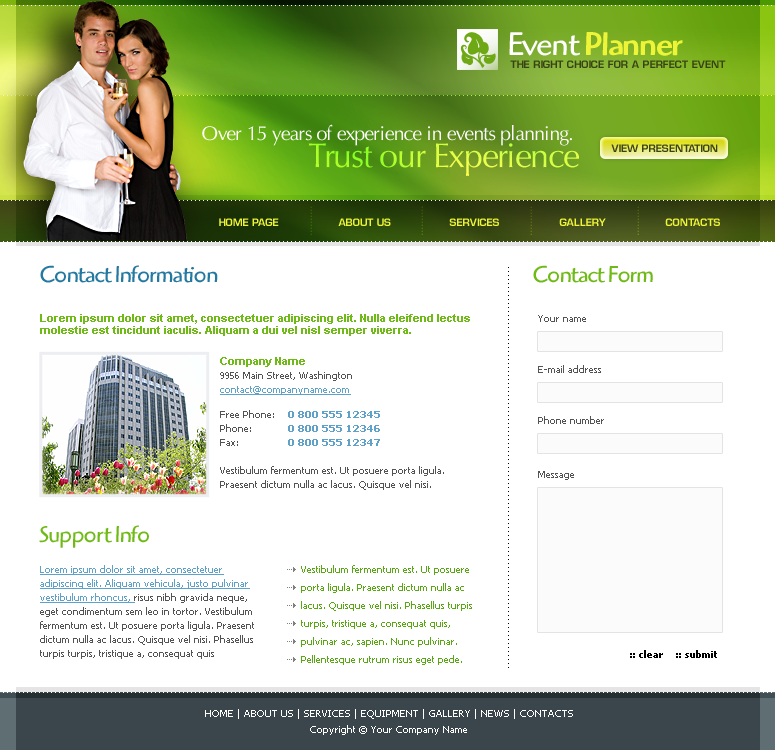
<style>
.page{position:relative;width:775px;height:750px;background:#ffffff}
.page>*{position:absolute;margin:0}
.t1{font:34px "HighlanderStd-Medium";letter-spacing:-0.04em;color:#eef538}
.t2{font:34px "HighlanderStd-Book";letter-spacing:-0.04em;color:#ffffff}
.t3{font:10px "EurostileLTStd-Demi";color:#384314;text-transform:uppercase}
.t4{font:20px "OptimaLTStd";letter-spacing:-0.04em;color:#ffffff}
.t5{font:34px "OptimaLTStd";letter-spacing:-0.04em}
.t6{font:8.3px "EurostileLTStd-Demi";text-transform:uppercase}
.t7{font:10px "EurostileLTStd-Demi";color:#eef538;text-transform:uppercase}
.t8{font:24px "HighlanderStd-Book";letter-spacing:-0.04em;color:#2479a0}
.t9{font:10px "TrebuchetMS";color:#000000}
.t10{font:24px "HighlanderStd-Book";letter-spacing:-0.04em;color:#70ba17}
.t11{font:11px/12px "Arial-BoldMT";color:#70ba17}
.t12{font:10px "Tahoma";color:#535353}
.t13{font:10px/14px "Tahoma";color:#535353}
.t14{font:10px/14px "Tahoma";color:#5fa1c9;text-decoration:underline}
.t15{font:10px/14px "Tahoma-Bold";color:#5fa1c9}
.t16{font:10px/18px "Tahoma";color:#5aa715}
.t17{font:10px "Tahoma-Bold";color:#000000}
.t18{font:10px/16px "Tahoma";color:#ffffff}
</style>
<div class="page">
<p class="t1" style="left:509px;top:32px;width:174px;height:24px"><span class="t2">Event </span>Planner</p>
<p class="t3" style="left:510px;top:60px;width:216px;height:8px">THE RIGHT CHOICE FOR A PERFECT EVENT</p>
<p class="t4" style="left:202px;top:124px;width:370px;height:22px">Over 15 years of experience in events planning.</p>
<p class="t5" style="left:308px;top:143px;width:271px;height:33px">Trust our Experience</p>
<p class="t3" style="left:611px;top:144px;width:107px;height:8px">VIEW PRESENTATION</p>
<p class="t6" style="left:310px;top:206px;width:2px;height:29px;rotate:90deg">..........</p>
<p class="t6" style="left:421px;top:206px;width:2px;height:29px;rotate:90deg">..........</p>
<p class="t6" style="left:530px;top:206px;width:2px;height:29px;rotate:90deg">..........</p>
<p class="t6" style="left:637px;top:206px;width:2px;height:29px;rotate:90deg">..........</p>
<p class="t7" style="left:219px;top:218px;width:60px;height:8px">HOME PAGE</p>
<p class="t7" style="left:338px;top:218px;width:53px;height:8px">ABOUT US</p>
<p class="t7" style="left:449px;top:218px;width:50px;height:8px">SERVICES</p>
<p class="t7" style="left:559px;top:218px;width:47px;height:8px">GALLERY</p>
<p class="t7" style="left:665px;top:218px;width:55px;height:8px">CONTACTS</p>
<p class="t8" style="left:40px;top:265px;width:178px;height:18px">Contact Information</p>
<p class="t9" style="left:508px;top:267px;width:1px;height:401px;rotate:90deg">.....................................................................................................</p>
<p class="t10" style="left:533px;top:265px;width:120px;height:18px">Contact Form</p>
<p class="t11" style="left:40px;top:314px;width:430px;height:22px">Lorem ipsum dolor sit amet, consectetuer adipiscing elit. Nulla eleifend lectus molestie est tincidunt iaculis. Aliquam a dui vel nisl semper viverra.</p>
<p class="t12" style="left:538px;top:315px;width:48px;height:7px">Your name</p>
<p class="t13" style="left:220px;top:357px;width:132px;height:38px"><span class="t11">Company Name<br></span>9956 Main Street, Washington<br><span class="t14">contact@companyname.com</span></p>
<p class="t12" style="left:538px;top:365px;width:63px;height:8px">E-mail address</p>
<p class="t13" style="left:220px;top:410px;width:54px;height:36px">Free Phone:<br>Phone:<br>Fax:</p>
<p class="t15" style="left:288px;top:411px;width:92px;height:35px;text-align:right">0 800 555 12345<br>0 800 555 12346<br>0 800 555 12347</p>
<p class="t12" style="left:538px;top:416px;width:66px;height:8px">Phone number</p>
<p class="t13" style="left:220px;top:466px;width:224px;height:24px">Vestibulum fermentum est. Ut posuere porta ligula. Praesent dictum nulla ac lacus. Quisque vel nisi.</p>
<p class="t12" style="left:538px;top:471px;width:36px;height:9px">Message</p>
<p class="t10" style="left:39px;top:525px;width:110px;height:23px">Support Info</p>
<p class="t13" style="left:40px;top:565px;width:214px;height:94px"><span class="t14">Lorem ipsum dolor sit amet, consectetuer adipiscing elit. Aliquam vehicula, justo pulvinar vestibulum rhoncus, </span>risus nibh gravida neque, eget condimentum sem leo in tortor. Vestibulum fermentum est. Ut posuere porta ligula. Praesent dictum nulla ac lacus. Quisque vel nisi. Phasellus turpis turpis, tristique a, consequat quis</p>
<p class="t16" style="left:301px;top:565px;width:171px;height:100px">Vestibulum fermentum est. Ut posuere porta ligula. Praesent dictum nulla ac lacus. Quisque vel nisi. Phasellus turpis turpis, tristique a, consequat quis, pulvinar ac, sapien. Nunc pulvinar. Pellentesque rutrum risus eget pede.</p>
<p class="t17" style="left:630px;top:650px;width:87px;height:8px">:: clear    :: submit</p>
<p class="t18" style="left:205px;top:709px;width:368px;height:26px;text-align:center">HOME | ABOUT US | SERVICES | EQUIPMENT | GALLERY | NEWS | CONTACTS<br>Copyright © Your Company Name</p>
</div>
